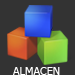
<style>
.page{position:relative;width:75px;height:75px;background:#333333}
.page>*{position:absolute;margin:0}
.t1{font:11px "Tahoma";color:#ffffff}
</style>
<div class="page">
<p class="t1" style="left:13px;top:67px;width:47px;height:8px">ALMACEN</p>
</div>
